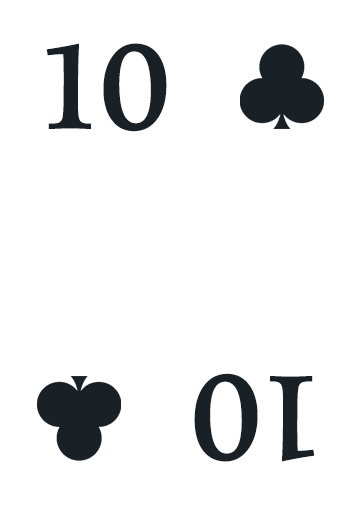
<style>
.page{position:relative;width:361px;height:505px;background:#ffffff}
.page>*{position:absolute;margin:0}
.t1{font:120px "IowanOldStyle-Bold";letter-spacing:-0.05em;color:#192026}
</style>
<div class="page">
<p class="t1" style="left:46px;top:43px;width:121px;height:89px">10</p>
<p class="t1" style="left:194px;top:373px;width:121px;height:89px;rotate:180deg">10</p>
</div>
